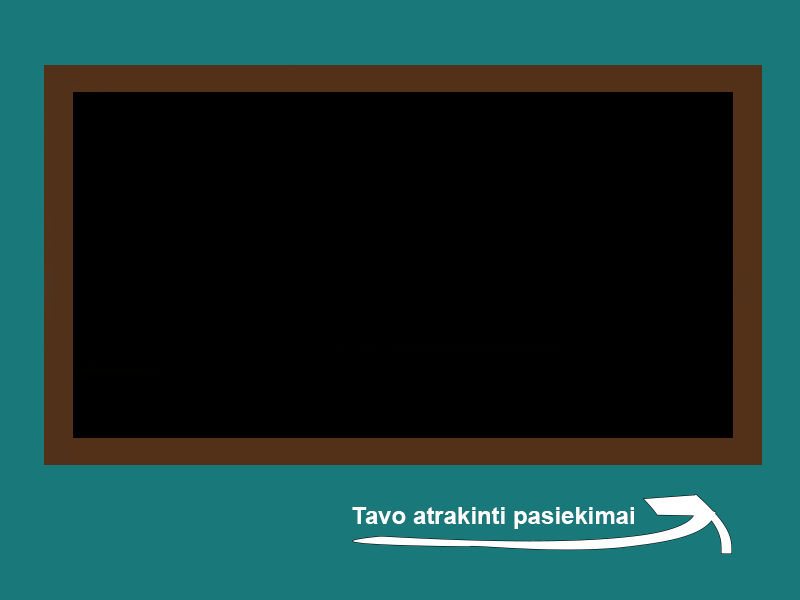
<style>
.page{position:relative;width:800px;height:600px;background:#000000}
.page>*{position:absolute;margin:0}
.t1{font:24px "Arial-BoldMT";color:#ffffff}
</style>
<div class="page">
<p class="t1" style="left:352px;top:507px;width:282px;height:22px">Tavo atrakinti pasiekimai</p>
</div>
